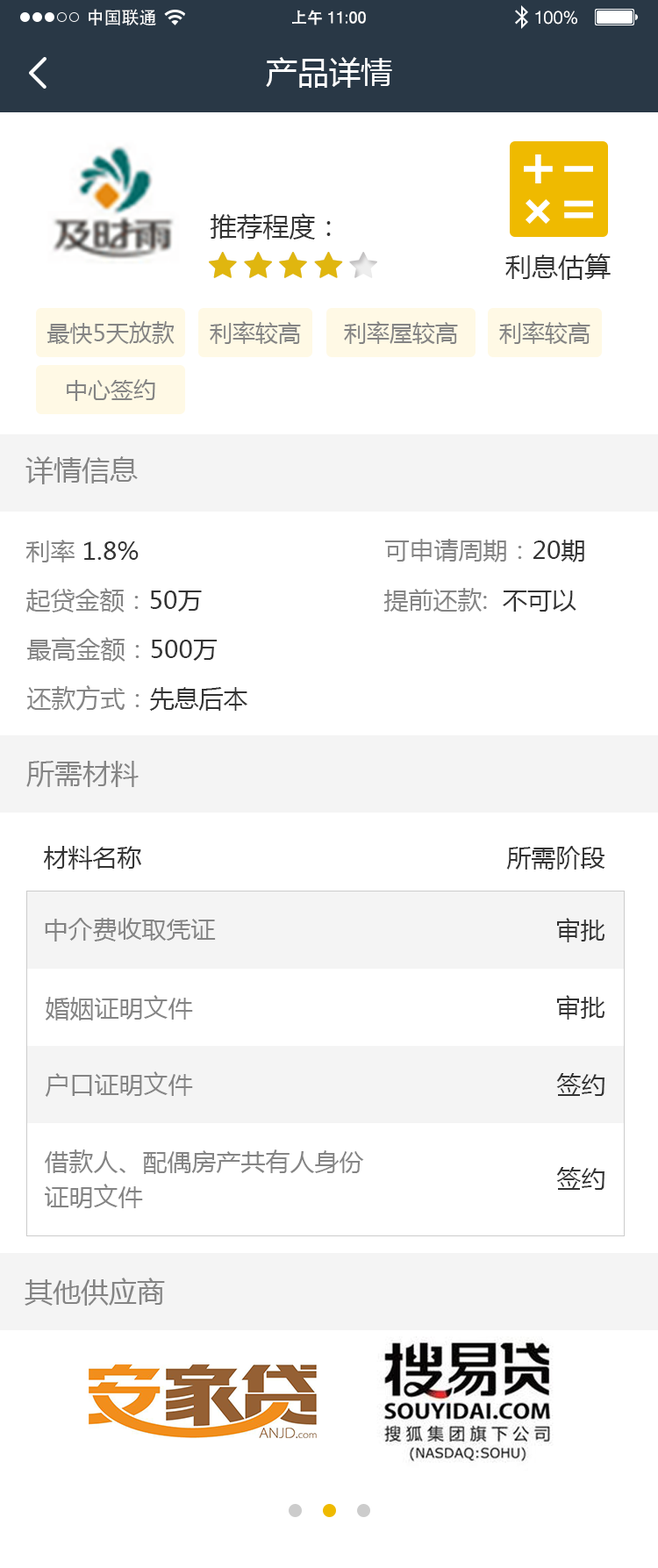
<style>
.page{position:relative;width:658px;height:1568px;background:#ffffff}
.page>*{position:absolute;margin:0}
.t1{font:17.5px "STHeiti";color:#ffffff}
.t2{font:15.8px "MicrosoftSansSerif";color:#ffffff}
.t3{font:15.8px "STHeiti";color:#ffffff}
.t4{font:17.5px "MicrosoftSansSerif";color:#ffffff}
.t5{font:31.6px "MicrosoftYaHei";color:#ffffff}
.t6{font:26.3px "MicrosoftYaHei";color:#333333}
.t7{font:22.8px "MicrosoftYaHei";color:#848484}
.t8{font:28.1px "MicrosoftYaHei";color:#848484}
.t9{font:24.6px "MicrosoftYaHei";color:#333333}
.t10{font:24.6px "MicrosoftYaHei";color:#848484}
.t11{font:24.6px/35.1px "MicrosoftYaHei";color:#848484}
</style>
<div class="page">
<p class="t1" style="left:89px;top:9px;width:67px;height:16px">中国联通</p>
<p class="t2" style="left:292px;top:10px;width:74px;height:15px"><span class="t3">上午 </span>11:00</p>
<p class="t4" style="left:535px;top:11px;width:42px;height:14px">100%</p>
<p class="t5" style="left:266px;top:57px;width:126px;height:31px">产品详情</p>
<p class="t6" style="left:211px;top:213px;width:120px;height:27px">推荐程度：</p>
<p class="t6" style="left:505px;top:254px;width:106px;height:26px">利息估算</p>
<p class="t7" style="left:47px;top:321px;width:128px;height:23px">最快5天放款</p>
<p class="t7" style="left:210px;top:321px;width:91px;height:23px">利率较高</p>
<p class="t7" style="left:344px;top:321px;width:114px;height:23px">利率屋较高</p>
<p class="t7" style="left:499px;top:321px;width:92px;height:23px">利率较高</p>
<p class="t7" style="left:67px;top:379px;width:88px;height:22px">中心签约</p>
<p class="t8" style="left:25px;top:456px;width:113px;height:28px">详情信息</p>
<p class="t9" style="left:25px;top:540px;width:114px;height:22px"><span class="t10">利率 </span>1.8%</p>
<p class="t10" style="left:385px;top:539px;width:199px;height:23px">可申请周期：<span class="t9">20期</span></p>
<p class="t10" style="left:26px;top:588px;width:176px;height:24px">起贷金额：<span class="t9">50万</span></p>
<p class="t10" style="left:383px;top:588px;width:193px;height:24px">提前还款:  <span class="t9">不可以</span></p>
<p class="t10" style="left:26px;top:637px;width:192px;height:25px">最高金额：<span class="t9">500万</span></p>
<p class="t10" style="left:27px;top:685px;width:220px;height:26px">还款方式：<span class="t9">先息后本</span></p>
<p class="t8" style="left:26px;top:761px;width:113px;height:26px">所需材料</p>
<p class="t9" style="left:44px;top:846px;width:97px;height:24px">材料名称</p>
<p class="t9" style="left:506px;top:846px;width:99px;height:24px">所需阶段</p>
<p class="t10" style="left:45px;top:918px;width:171px;height:24px">中介费收取凭证</p>
<p class="t9" style="left:557px;top:918px;width:48px;height:24px">审批</p>
<p class="t10" style="left:45px;top:995px;width:148px;height:25px">婚姻证明文件</p>
<p class="t9" style="left:557px;top:995px;width:48px;height:25px">审批</p>
<p class="t10" style="left:45px;top:1071px;width:148px;height:26px">户口证明文件</p>
<p class="t9" style="left:556px;top:1073px;width:49px;height:23px">签约</p>
<p class="t11" style="left:45px;top:1149px;width:319px;height:59px">借款人、配偶房产共有人身份<br>证明文件</p>
<p class="t9" style="left:556px;top:1167px;width:49px;height:23px">签约</p>
<p class="t8" style="left:25px;top:1278px;width:140px;height:28px">其他供应商</p>
</div>
